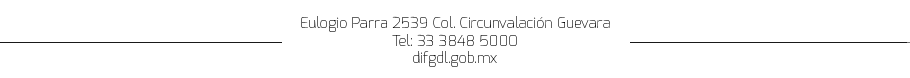
<style>
.page{position:relative;width:910px;height:78px;background:#ffffff}
.page>*{position:absolute;margin:0}
.t1{font:14.7px "Exo-Thin";color:#000000}
</style>
<div class="page">
<p class="t1" style="left:301px;top:16px;width:309px;height:51px;text-align:center">Eulogio Parra 2539 Col. Circunvalación Guevara<br>Tel: 33 3848 5000<br>difgdl.gob.mx</p>
</div>
